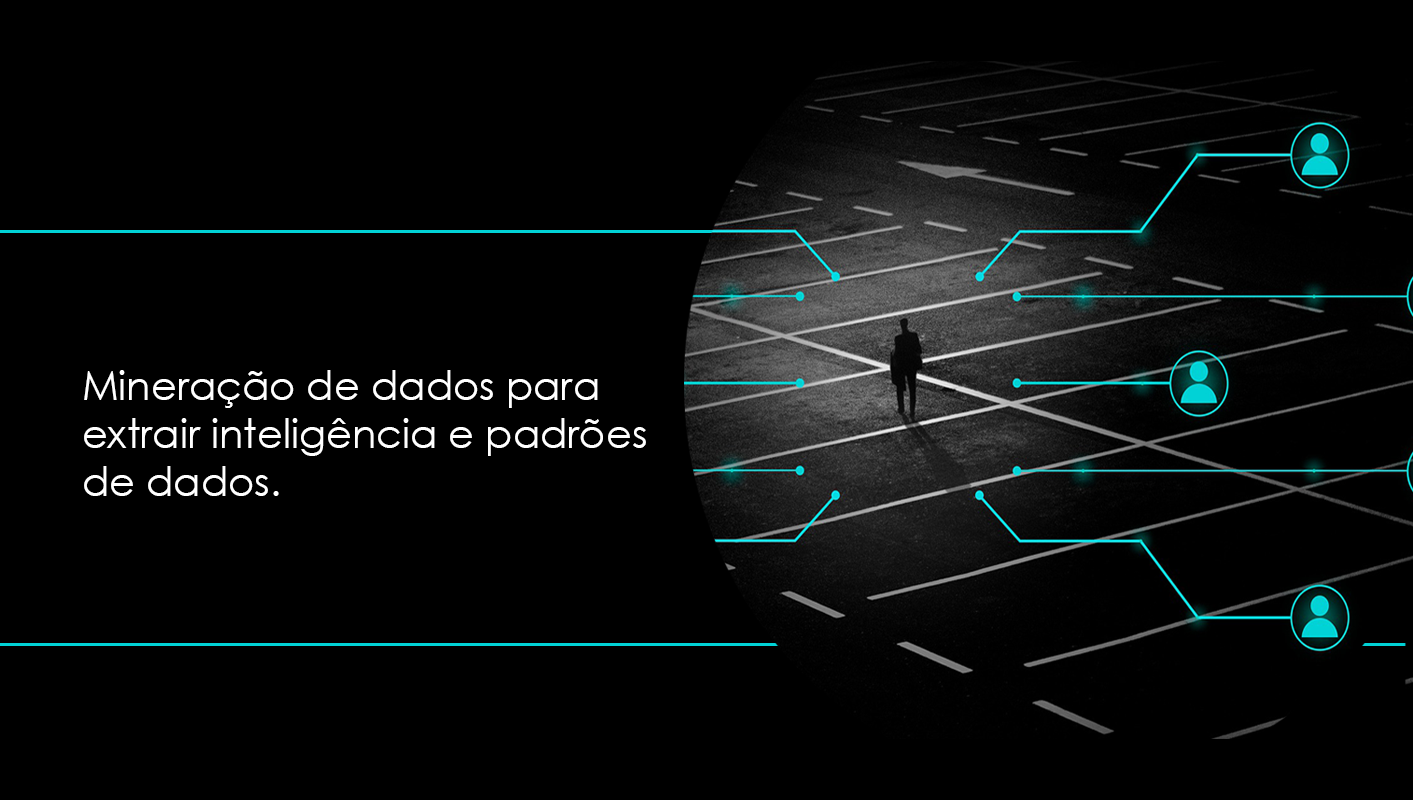
<style>
.page{position:relative;width:1413px;height:800px;background:#000000}
.page>*{position:absolute;margin:0}
.t1{font:40px "CenturyGothic";color:#ffffff}
</style>
<div class="page">
<p class="t1" style="left:84px;top:370px;width:562px;height:126px">Mineração de dados para <br>extrair inteligência e padrões <br>de dados.</p>
</div>
